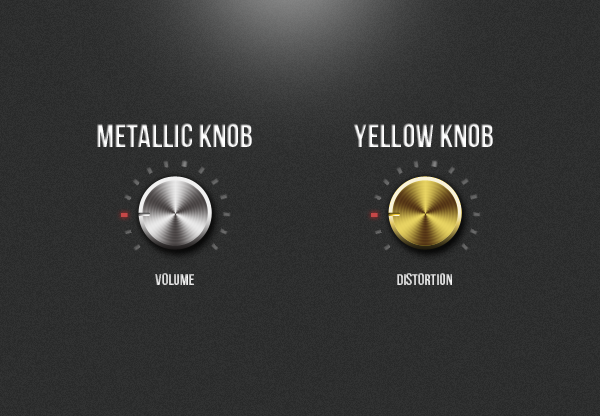
<style>
.page{position:relative;width:600px;height:416px}
.page>*{position:absolute;margin:0}
.t1{font:33.3px "BebasNeue"}
.t2{font:16px "BebasNeue";color:#e5e2e2}
</style>
<div class="page">
<p class="t1" style="left:97px;top:123px;width:155px;height:24px">MetalLic KNOB</p>
<p class="t1" style="left:353px;top:123px;width:140px;height:24px">YELLOW KNOB</p>
<p class="t2" style="left:155px;top:273px;width:39px;height:12px">Volume</p>
<p class="t2" style="left:397px;top:273px;width:55px;height:12px">Distortion</p>
</div>
